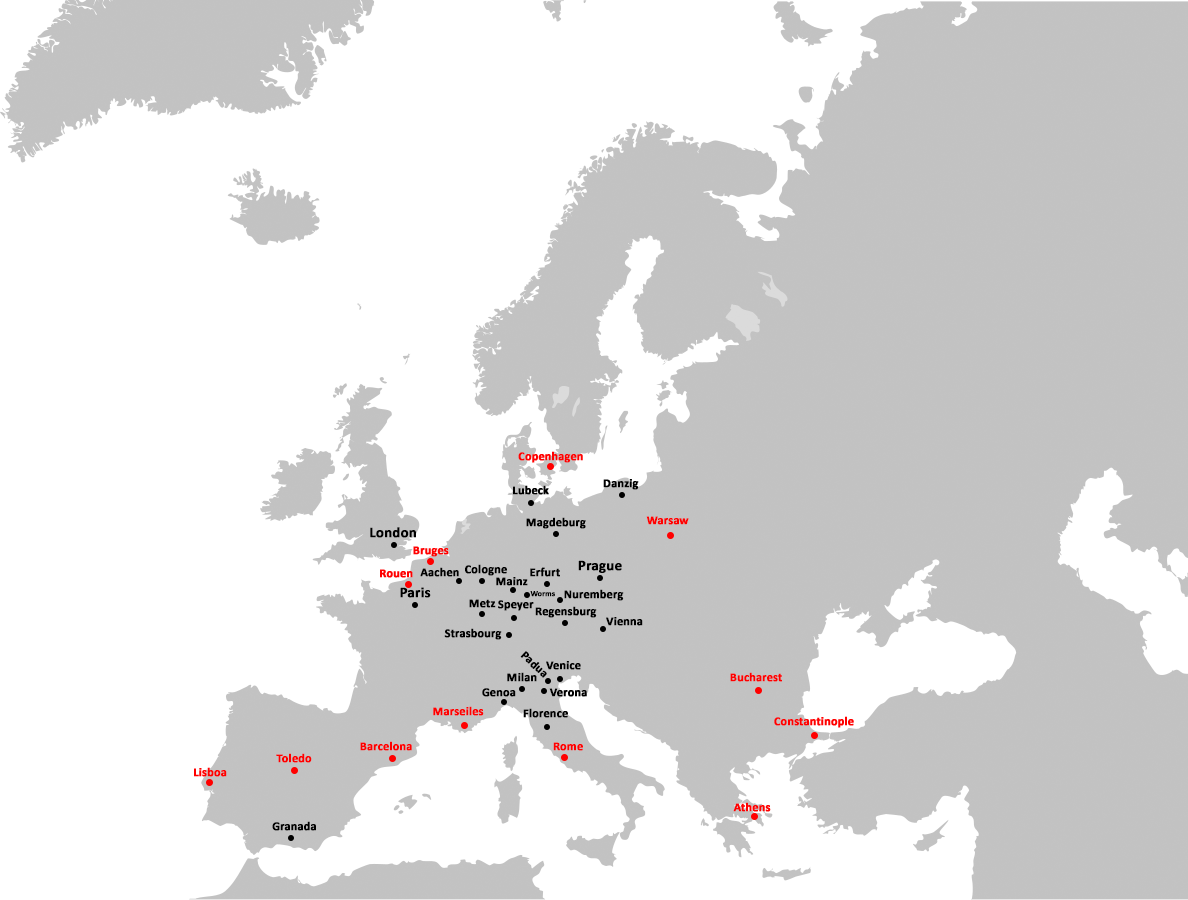
<style>
.page{position:relative;width:1188px;height:900px;background:#ffffff}
.page>*{position:absolute;margin:0}
.t1{font:12px "Calibri-Bold";color:#ff0000;font-weight:bold}
.t2{font:12px "Calibri-Bold";color:#000000;font-weight:bold}
.t3{font:14.6px "Calibri-Bold";color:#000000;font-weight:bold}
.t4{font:8px "Calibri-Bold";color:#000000;font-weight:bold}
</style>
<div class="page">
<p class="t1" style="left:518px;top:451px;width:65px;height:12px">Copenhagen</p>
<p class="t2" style="left:513px;top:485px;width:36px;height:10px">Lubeck</p>
<p class="t2" style="left:603px;top:479px;width:36px;height:11px">Danzig</p>
<p class="t2" style="left:526px;top:517px;width:60px;height:12px">Magdeburg</p>
<p class="t1" style="left:646px;top:516px;width:43px;height:9px">Warsaw</p>
<p class="t3" style="left:370px;top:527px;width:46px;height:11px">London</p>
<p class="t1" style="left:413px;top:546px;width:36px;height:11px">Bruges</p>
<p class="t1" style="left:380px;top:569px;width:33px;height:9px">Rouen</p>
<p class="t2" style="left:420px;top:567px;width:39px;height:10px">Aachen</p>
<p class="t2" style="left:465px;top:564px;width:42px;height:12px">Cologne</p>
<p class="t2" style="left:530px;top:567px;width:30px;height:10px">Erfurt</p>
<p class="t3" style="left:578px;top:560px;width:44px;height:13px">Prague</p>
<p class="t2" style="left:496px;top:577px;width:32px;height:9px">Mainz</p>
<p class="t3" style="left:400px;top:587px;width:31px;height:11px">Paris</p>
<p class="t4" style="left:530px;top:591px;width:25px;height:6px">Worms</p>
<p class="t2" style="left:564px;top:589px;width:60px;height:12px">Nuremberg</p>
<p class="t2" style="left:469px;top:599px;width:27px;height:9px">Metz</p>
<p class="t2" style="left:498px;top:600px;width:36px;height:11px">Speyer</p>
<p class="t2" style="left:535px;top:606px;width:62px;height:12px">Regensburg</p>
<p class="t2" style="left:606px;top:617px;width:37px;height:9px">Vienna</p>
<p class="t2" style="left:444px;top:628px;width:58px;height:12px">Strasbourg</p>
<p class="t2" style="left:520px;top:651px;width:27px;height:27px;rotate:43deg">Padua</p>
<p class="t2" style="left:546px;top:661px;width:35px;height:9px">Venice</p>
<p class="t2" style="left:507px;top:672px;width:30px;height:10px">Milan</p>
<p class="t1" style="left:730px;top:672px;width:52px;height:10px">Bucharest</p>
<p class="t2" style="left:482px;top:688px;width:34px;height:9px">Genoa</p>
<p class="t2" style="left:549px;top:688px;width:38px;height:9px">Verona</p>
<p class="t1" style="left:433px;top:706px;width:51px;height:10px">Marseiles</p>
<p class="t2" style="left:523px;top:708px;width:45px;height:10px">Florence</p>
<p class="t1" style="left:774px;top:716px;width:80px;height:12px">Constantinople</p>
<p class="t1" style="left:360px;top:741px;width:52px;height:10px">Barcelona</p>
<p class="t1" style="left:553px;top:742px;width:30px;height:9px">Rome</p>
<p class="t1" style="left:276px;top:753px;width:36px;height:10px">Toledo</p>
<p class="t1" style="left:194px;top:767px;width:33px;height:10px">Lisboa</p>
<p class="t1" style="left:733px;top:802px;width:38px;height:10px">Athens</p>
<p class="t2" style="left:272px;top:821px;width:44px;height:10px">Granada</p>
</div>
